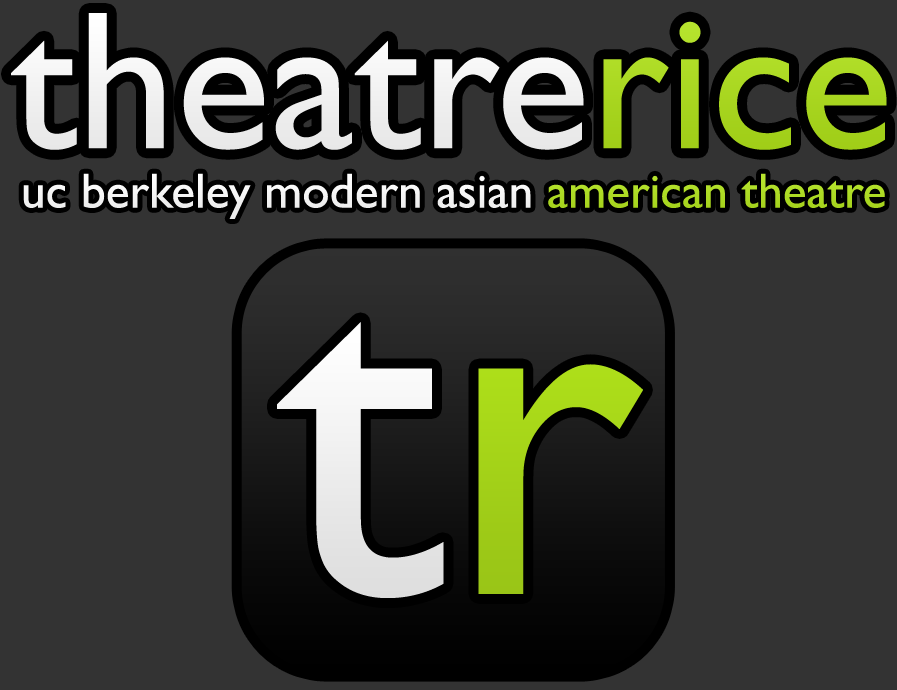
<style>
.page{position:relative;width:897px;height:690px;background:#333333}
.page>*{position:absolute;margin:0}
.t1{font:197.8px "GillSansMT";color:#ffffff}
.t2{font:197.8px "GillSansMT";color:#b0e21a}
.t3{font:49.5px "GillSansMT";color:#ffffff}
.t4{font:49.5px "GillSansMT";color:#b0e21a}
.t5{font:501.2px "GillSansMT";color:#ffffff}
.t6{font:501.2px "GillSansMT";color:#b0e21a}
</style>
<div class="page">
<p class="t1" style="left:11px;top:13px;width:876px;height:137px">theatre<span class="t2">rice</span></p>
<p class="t3" style="left:23px;top:173px;width:862px;height:46px">uc berkeley modern asian <span class="t4">american theatre</span></p>
<p class="t5" style="left:277px;top:322px;width:366px;height:276px">t<span class="t6">r</span></p>
</div>
